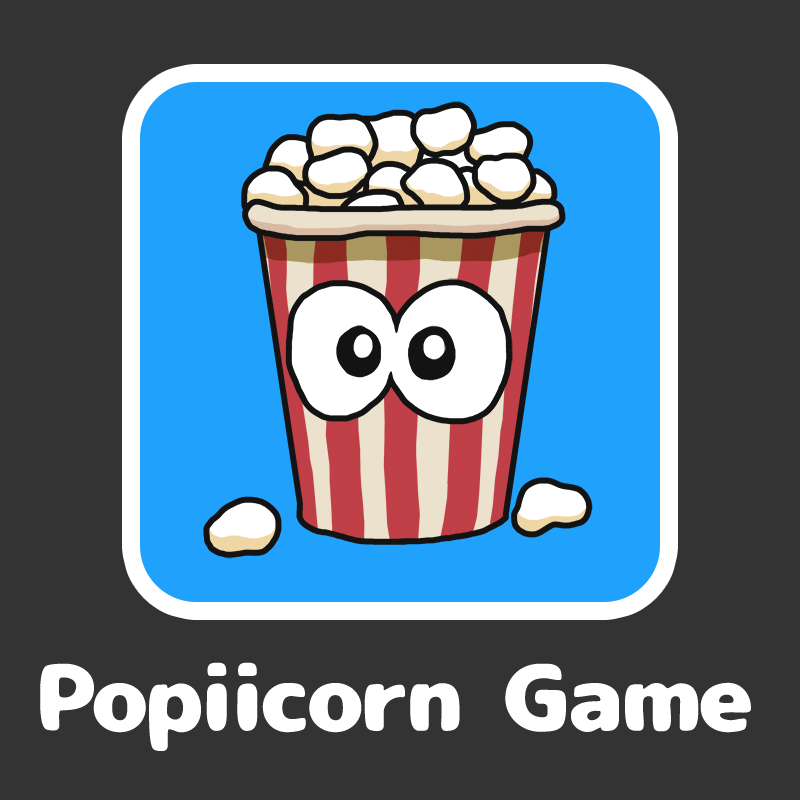
<style>
.page{position:relative;width:800px;height:800px;background:#333333}
.page>*{position:absolute;margin:0}
.t1{font:93.7px "07NikumaruFont";letter-spacing:-0.04em;color:#ffffff}
</style>
<div class="page">
<p class="t1" style="left:40px;top:662px;width:711px;height:89px">Popiicorn Game</p>
</div>
